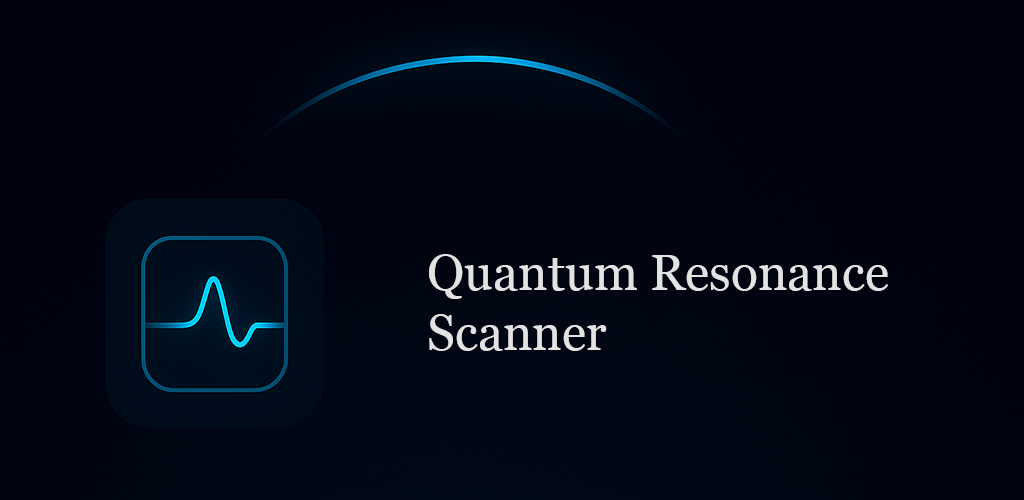
<style>
.page{position:relative;width:1024px;height:500px}
.page>*{position:absolute;margin:0}
.t1{font:50px "Georgia";color:#e3e3e3}
</style>
<div class="page">
<p class="t1" style="left:429px;top:254px;width:459px;height:97px">Quantum Resonance<br>Scanner</p>
</div>
